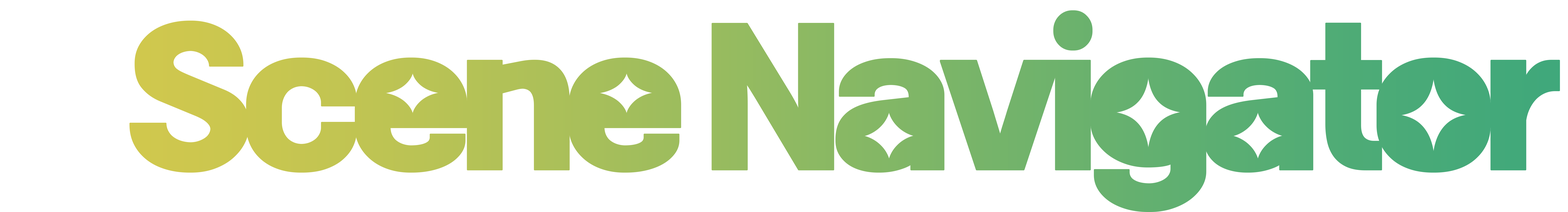
<style>
.page{position:relative;width:1568px;height:212px;background:#ffffff}
.page>*{position:absolute;margin:0}
.t1{font:171.9px "PyeongChangPeace-Bold";letter-spacing:-0.06em}
</style>
<div class="page">
<p class="t1" style="left:130px;top:11px;width:1429px;height:200px">Scene Navigator</p>
</div>
